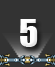
<style>
.page{position:relative;width:55px;height:67px;background:#333333}
.page>*{position:absolute;margin:0}
.t1{font:36px "Impact";color:#fefefe}
</style>
<div class="page">
<p class="t1" style="left:20px;top:19px;width:18px;height:28px">5</p>
</div>
